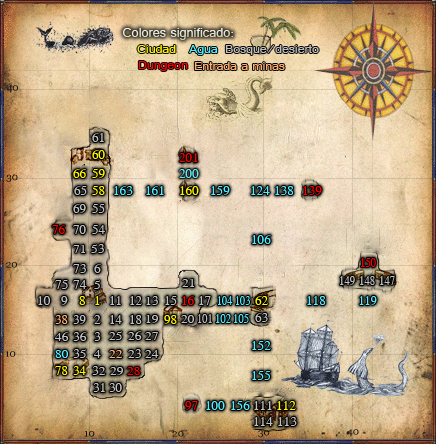
<style>
.page{position:relative;width:436px;height:444px}
.page>*{position:absolute;margin:0}
.t1{font:14px "Raavi";color:#e7e7d5}
.t2{font:13.5px "Raavi";color:#fff600}
.t3{font:13.5px "Raavi";color:#53edff}
.t4{font:13.5px "Raavi";color:#c0c0c0}
.t5{font:13.5px "Raavi";color:#ff0000}
.t6{font:13.5px "Raavi";color:#ffaf75}
.t7{font:14.4px "Morpheus";color:#c0c0c0}
.t8{font:14.4px "Morpheus";color:#fff600}
.t9{font:14px "Morpheus";color:#ff0000}
.t10{font:14px "Morpheus";color:#63eaf8}
.t11{font:14px "Morpheus";color:#c0c0c0}
.t12{font:14px "Morpheus";color:#fff600}
.t13{font:14px "Morpheus";color:#53edff}
.t14{font:13.2px "Morpheus";color:#c0c0c0;scale:1.08 1}
.t15{font:14px "Morpheus";color:#ff0000;scale:0.81 1}
.t16{font:13.7px "Morpheus";color:#c0c0c0;scale:1.05 1}
.t17{font:13.3px "Morpheus";color:#c0c0c0;scale:1.07 1}
.t18{font:14px "Morpheus";color:#c0c0c0;scale:0.81 1}
.t19{font:14px "Morpheus";color:#53edff;scale:0.77 1}
.t20{font:14px "Morpheus";color:#53edff;scale:0.92 1}
.t21{font:14px "Morpheus";color:#ffaf75}
.t22{font:14px "Morpheus";color:#c0c0c0;scale:0.8 1}
.t23{font:14px "Morpheus";color:#53edff;scale:0.81 1}
.t24{font:13.2px "Morpheus";color:#53edff;scale:1.08 1}
.t25{font:13.2px "Morpheus";color:#ffaf75;scale:1.08 1}
.t26{font:13.2px "Morpheus";color:#ff0000;scale:1.08 1}
</style>
<div class="page">
<p class="t1" style="left:123px;top:28px;width:110px;height:12px">Colores significado:</p>
<p class="t2" style="left:137px;top:45px;width:39px;height:8px">Ciudad</p>
<p class="t3" style="left:189px;top:45px;width:29px;height:10px">Agua</p>
<p class="t4" style="left:225px;top:45px;width:94px;height:10px">Bosque/desierto</p>
<p class="t5" style="left:138px;top:61px;width:50px;height:10px">Dungeon</p>
<p class="t6" style="left:194px;top:62px;width:91px;height:8px">Entrada a minas</p>
<p class="t7" style="left:92px;top:133px;width:12px;height:9px">61</p>
<p class="t8" style="left:92px;top:150px;width:13px;height:9px">60</p>
<p class="t9" style="left:179px;top:153px;width:19px;height:9px">201</p>
<p class="t8" style="left:73px;top:169px;width:14px;height:9px">66</p>
<p class="t8" style="left:92px;top:169px;width:13px;height:9px">59</p>
<p class="t10" style="left:179px;top:169px;width:20px;height:9px">200</p>
<p class="t11" style="left:74px;top:186px;width:13px;height:9px">65</p>
<p class="t12" style="left:92px;top:186px;width:13px;height:9px">58</p>
<p class="t13" style="left:114px;top:186px;width:19px;height:9px">163</p>
<p class="t13" style="left:146px;top:186px;width:18px;height:9px">161</p>
<p class="t12" style="left:180px;top:186px;width:19px;height:9px">160</p>
<p class="t13" style="left:211px;top:186px;width:19px;height:9px">159</p>
<p class="t13" style="left:251px;top:186px;width:19px;height:9px">124</p>
<p class="t13" style="left:275px;top:186px;width:19px;height:9px">138</p>
<p class="t9" style="left:303px;top:186px;width:19px;height:9px">139</p>
<p class="t11" style="left:73px;top:204px;width:13px;height:9px">69</p>
<p class="t11" style="left:92px;top:204px;width:13px;height:9px">55</p>
<p class="t9" style="left:52px;top:225px;width:14px;height:9px">76</p>
<p class="t11" style="left:73px;top:225px;width:13px;height:9px">70</p>
<p class="t11" style="left:92px;top:225px;width:13px;height:9px">54</p>
<p class="t14" style="left:73px;top:245px;width:13px;height:8px">71</p>
<p class="t14" style="left:91px;top:244px;width:13px;height:9px">53</p>
<p class="t13" style="left:252px;top:235px;width:19px;height:9px">106</p>
<p class="t11" style="left:73px;top:264px;width:13px;height:9px">73</p>
<p class="t11" style="left:94px;top:264px;width:7px;height:9px">6</p>
<p class="t15" style="left:361px;top:258px;width:15px;height:9px">150</p>
<p class="t16" style="left:55px;top:280px;width:13px;height:9px">75</p>
<p class="t16" style="left:73px;top:280px;width:14px;height:9px">74</p>
<p class="t17" style="left:94px;top:280px;width:6px;height:9px">5</p>
<p class="t14" style="left:182px;top:279px;width:13px;height:8px">21</p>
<p class="t18" style="left:340px;top:276px;width:15px;height:9px">149</p>
<p class="t18" style="left:360px;top:276px;width:15px;height:9px">148</p>
<p class="t18" style="left:380px;top:276px;width:15px;height:9px">147</p>
<p class="t11" style="left:38px;top:296px;width:13px;height:9px">10</p>
<p class="t11" style="left:61px;top:296px;width:7px;height:9px">9</p>
<p class="t12" style="left:79px;top:296px;width:7px;height:9px">8</p>
<p class="t12" style="left:95px;top:296px;width:5px;height:9px">1</p>
<p class="t11" style="left:110px;top:296px;width:11px;height:9px">11</p>
<p class="t11" style="left:130px;top:296px;width:12px;height:9px">12</p>
<p class="t14" style="left:146px;top:296px;width:12px;height:9px">13</p>
<p class="t11" style="left:165px;top:296px;width:12px;height:9px">15</p>
<p class="t9" style="left:182px;top:296px;width:13px;height:9px">16</p>
<p class="t11" style="left:199px;top:296px;width:12px;height:9px">17</p>
<p class="t19" style="left:218px;top:296px;width:15px;height:9px">104</p>
<p class="t19" style="left:236px;top:296px;width:14px;height:9px">103</p>
<p class="t12" style="left:255px;top:296px;width:13px;height:9px">62</p>
<p class="t13" style="left:307px;top:296px;width:19px;height:9px">118</p>
<p class="t20" style="left:359px;top:296px;width:18px;height:9px">119</p>
<p class="t21" style="left:55px;top:315px;width:13px;height:9px">38</p>
<p class="t11" style="left:73px;top:315px;width:13px;height:9px">39</p>
<p class="t11" style="left:94px;top:315px;width:7px;height:9px">2</p>
<p class="t11" style="left:110px;top:315px;width:12px;height:9px">14</p>
<p class="t11" style="left:130px;top:315px;width:12px;height:9px">18</p>
<p class="t14" style="left:146px;top:315px;width:13px;height:8px">19</p>
<p class="t12" style="left:164px;top:315px;width:13px;height:9px">98</p>
<p class="t14" style="left:181px;top:315px;width:14px;height:8px">20</p>
<p class="t22" style="left:198px;top:314px;width:14px;height:9px">101</p>
<p class="t23" style="left:216px;top:314px;width:15px;height:9px">102</p>
<p class="t23" style="left:234px;top:314px;width:15px;height:9px">105</p>
<p class="t11" style="left:255px;top:313px;width:13px;height:9px">63</p>
<p class="t14" style="left:55px;top:332px;width:14px;height:9px">46</p>
<p class="t14" style="left:73px;top:332px;width:14px;height:9px">36</p>
<p class="t14" style="left:94px;top:332px;width:7px;height:9px">3</p>
<p class="t14" style="left:109px;top:331px;width:13px;height:9px">25</p>
<p class="t14" style="left:128px;top:331px;width:14px;height:9px">26</p>
<p class="t14" style="left:145px;top:332px;width:13px;height:8px">27</p>
<p class="t13" style="left:252px;top:341px;width:19px;height:9px">152</p>
<p class="t24" style="left:55px;top:350px;width:14px;height:8px">80</p>
<p class="t14" style="left:73px;top:349px;width:13px;height:9px">35</p>
<p class="t14" style="left:94px;top:350px;width:7px;height:8px">4</p>
<p class="t25" style="left:109px;top:350px;width:14px;height:8px">22</p>
<p class="t14" style="left:128px;top:349px;width:13px;height:9px">23</p>
<p class="t14" style="left:145px;top:350px;width:14px;height:8px">24</p>
<p class="t12" style="left:55px;top:366px;width:13px;height:9px">78</p>
<p class="t12" style="left:73px;top:366px;width:13px;height:9px">34</p>
<p class="t14" style="left:92px;top:366px;width:14px;height:9px">32</p>
<p class="t14" style="left:110px;top:367px;width:14px;height:8px">29</p>
<p class="t26" style="left:127px;top:367px;width:13px;height:8px">28</p>
<p class="t13" style="left:252px;top:371px;width:19px;height:9px">155</p>
<p class="t11" style="left:93px;top:383px;width:12px;height:9px">31</p>
<p class="t11" style="left:109px;top:383px;width:13px;height:9px">30</p>
<p class="t9" style="left:185px;top:401px;width:13px;height:9px">97</p>
<p class="t13" style="left:206px;top:401px;width:19px;height:9px">100</p>
<p class="t13" style="left:231px;top:401px;width:19px;height:9px">156</p>
<p class="t11" style="left:254px;top:401px;width:18px;height:9px">111</p>
<p class="t12" style="left:277px;top:401px;width:19px;height:9px">112</p>
<p class="t11" style="left:254px;top:417px;width:19px;height:9px">114</p>
<p class="t11" style="left:278px;top:417px;width:19px;height:9px">113</p>
</div>
